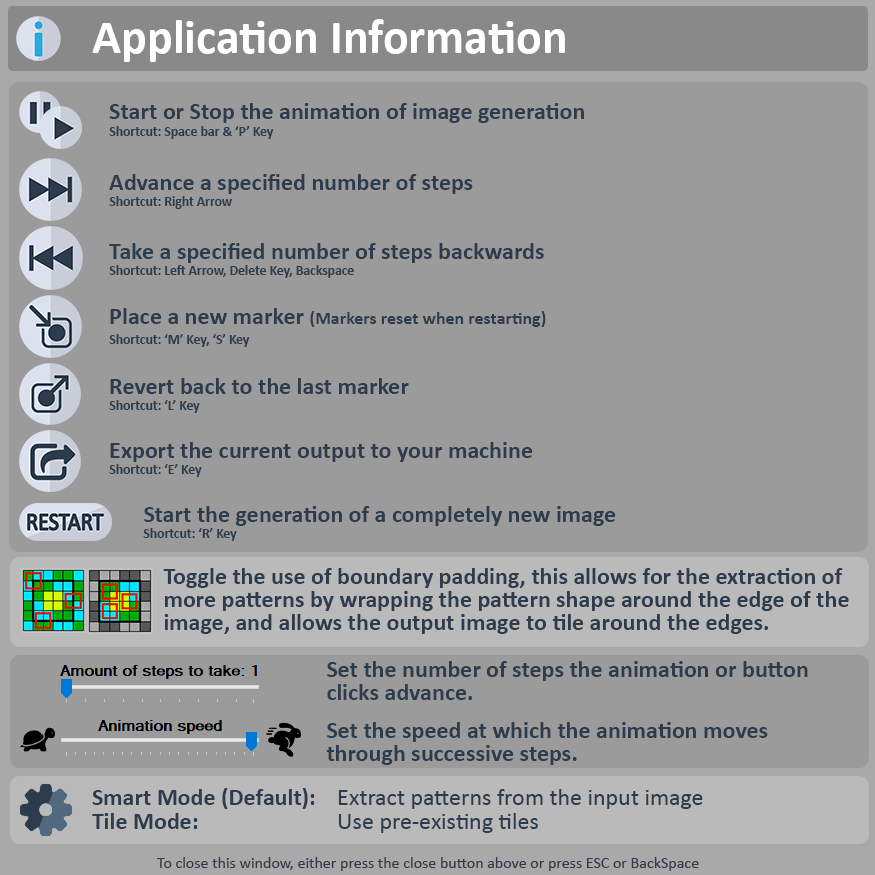
<style>
.page{position:relative;width:875px;height:875px;background:#9b9b9b}
.page>*{position:absolute;margin:0}
.t1{font:48px "Calibri-Bold";color:#ffffff}
.t2{font:24px "Calibri-Bold";color:#2c3c4c}
.t3{font:13.6px "Calibri-Bold";color:#2c3c4c}
.t4{font:18px/20.4px "Calibri-Bold";color:#2c3c4c}
.t5{font:24px/20.4px "Calibri-Bold";color:#2c3c4c}
.t6{font:13.6px/20.4px "Calibri-Bold";color:#2c3c4c}
.t7{font:24px/23px "Calibri-Bold";color:#2c3c4c}
.t8{font:24px/23.9px "Calibri";color:#2c3c4c}
.t9{font:24px/23.9px "Calibri-Bold";color:#2c3c4c}
.t10{font:16px "Calibri";color:#2c3c4c}
</style>
<div class="page">
<p class="t1" style="left:92px;top:19px;width:473px;height:43px">Application Information</p>
<p class="t2" style="left:109px;top:103px;width:475px;height:36px">Start or Stop the animation of image generation<br><span class="t3">Shortcut: Space bar &amp; ‘P’ Key</span></p>
<p class="t2" style="left:109px;top:174px;width:364px;height:35px">Advance a specified number of steps<br><span class="t3">Shortcut: Right Arrow</span></p>
<p class="t3" style="left:109px;top:243px;width:435px;height:35px"><span class="t2">Take a specified number of steps backwards<br></span>Shortcut: Left Arrow, Delete Key, Backspace</p>
<p class="t4" style="left:109px;top:308px;width:437px;height:39px"><span class="t5">Place a new marker </span>(Markers reset when restarting)<br><span class="t6">Shortcut: ‘M’ Key, ‘S’ Key</span></p>
<p class="t2" style="left:109px;top:378px;width:300px;height:35px">Revert back to the last marker<br><span class="t3">Shortcut: ‘L’ Key</span></p>
<p class="t2" style="left:109px;top:442px;width:424px;height:35px">Export the current output to your machine<br><span class="t3">Shortcut: ‘E’ Key</span></p>
<p class="t2" style="left:143px;top:506px;width:473px;height:35px">Start the generation of a completely new image <br><span class="t3">Shortcut: ‘R’ Key</span></p>
<p class="t7" style="left:163px;top:568px;width:686px;height:66px">Toggle the use of boundary padding, this allows for the extraction of <br>more patterns by wrapping the pattern shape around the edge of the <br>image, and allows the output image to tile around the edges.</p>
<p class="t7" style="left:327px;top:661px;width:481px;height:39px">Set the number of steps the animation or button <br>clicks advance.</p>
<p class="t7" style="left:326px;top:722px;width:442px;height:43px">Set the speed at which the animation moves <br>through successive steps.</p>
<p class="t8" style="left:92px;top:788px;width:611px;height:45px"><span class="t9">Smart Mode (Default):  </span>Extract patterns from the input image<br><span class="t9">Tile Mode:      </span>Use pre-existing tiles</p>
<p class="t10" style="left:157px;top:857px;width:542px;height:14px">To close this window, either press the close button above or press ESC or BackSpace</p>
</div>
